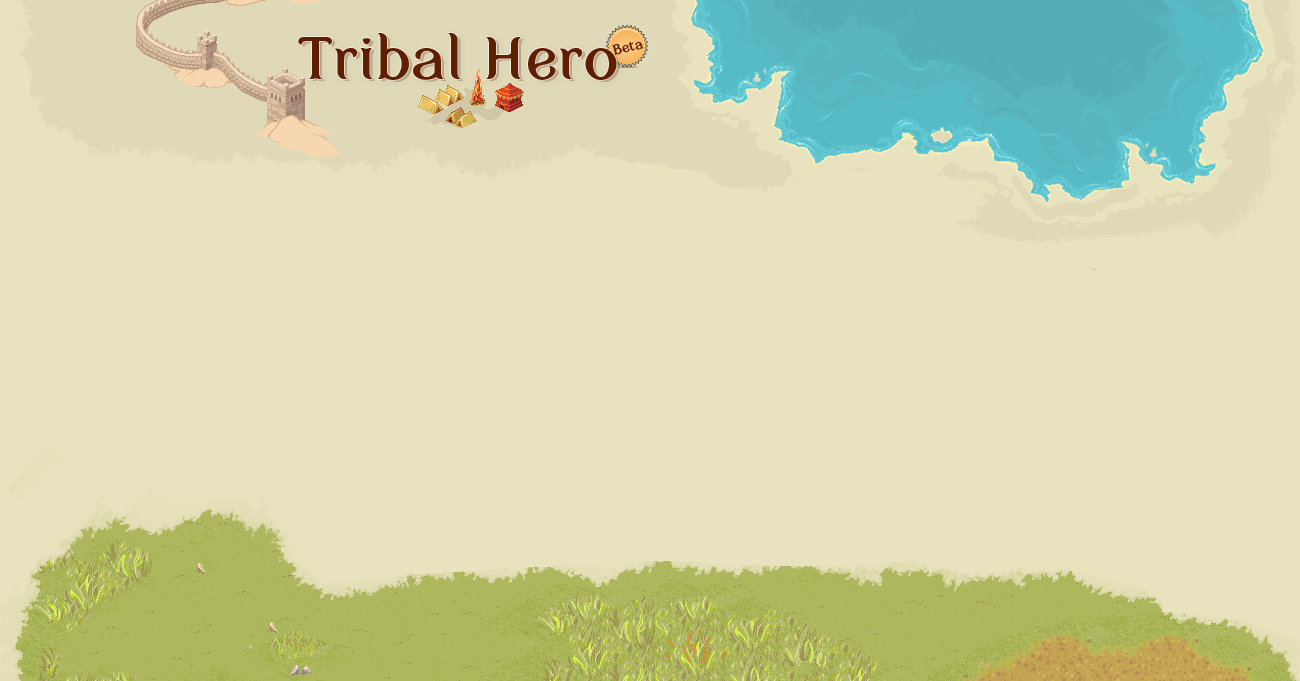
<style>
.page{position:relative;width:1300px;height:681px;background:#e8e2be}
.page>*{position:absolute;margin:0}
.t1{font:60px "MyFairCody";color:#5f1e00}
.t2{font:60px "MyFairCody"}
.t3{font:14px "MyFairCody";color:#5f1e00}
</style>
<div class="page">
<p class="t1" style="left:298px;top:33px;width:319px;height:47px">Tribal Hero</p>
<p class="t2" style="left:301px;top:35px;width:319px;height:47px">Tribal Hero</p>
<p class="t3" style="left:612px;top:41px;width:32px;height:14px;rotate:-15deg">Beta</p>
</div>
